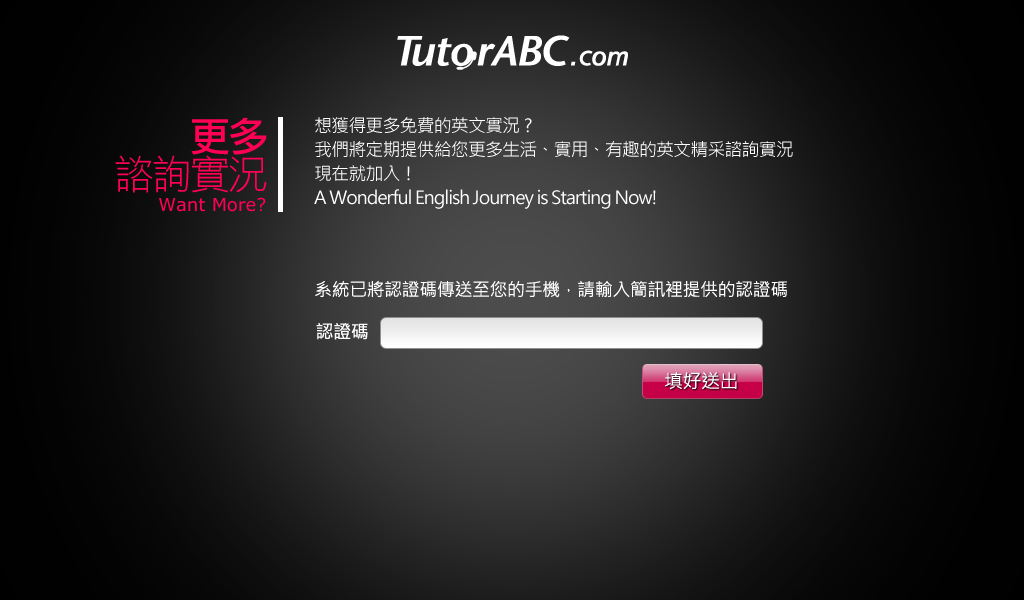
<style>
.page{position:relative;width:1024px;height:600px}
.page>*{position:absolute;margin:0}
.t1{font:40px/38px "DFLiHei-Lt-WIN-BF";letter-spacing:-0.05em;color:#ff0054}
.t2{font:40px/38px "DFLiHei-Md-WIN-BF";letter-spacing:-0.05em;color:#ff0054}
.t3{font:18px/24px "MicrosoftJhengHeiRegular";letter-spacing:-0.05em;color:#ffffff}
.t4{font:18px "Verdana";color:#ff0054}
.t5{font:18px "MicrosoftJhengHeiRegular";letter-spacing:-0.025em;color:#ffffff}
.t6{font:18px "MicrosoftJhengHeiRegular";letter-spacing:-0.05em;color:#ffffff;font-weight:bold}
.t7{font:19px "MicrosoftJhengHeiRegular";letter-spacing:-0.025em;color:#ffffff}
</style>
<div class="page">
<p class="t1" style="left:115px;top:117px;width:152px;height:76px;text-align:right"><span class="t2">更多<br></span>諮詢實況</p>
<p class="t3" style="left:314px;top:117px;width:479px;height:92px">想獲得更多免費的英文實況?<br>我們將定期提供給您更多生活、實用、有趣的英文精采諮詢實況<br>現在就加入！<br>A Wonderful English Journey is Starting Now!</p>
<p class="t4" style="left:159px;top:197px;width:107px;height:15px">Want More?</p>
<p class="t5" style="left:315px;top:281px;width:472px;height:17px">系統已將認證碼傳送至您的手機，請輸入簡訊裡提供的認證碼</p>
<p class="t6" style="left:316px;top:323px;width:52px;height:17px">認證碼</p>
<p class="t7" style="left:665px;top:372px;width:72px;height:18px">填好送出</p>
</div>
